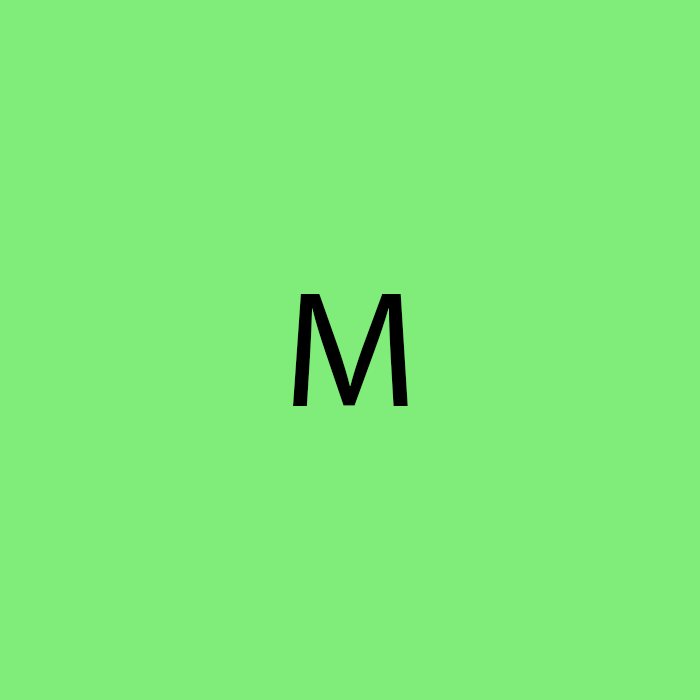
<style>
.page{position:relative;width:700px;height:700px;background:#80ed7a}
.page>*{position:absolute;margin:0}
.t1{font:166.7px "MyriadPro-Regular";color:#000000}
</style>
<div class="page">
<p class="t1" style="left:293px;top:294px;width:115px;height:112px">M</p>
</div>
